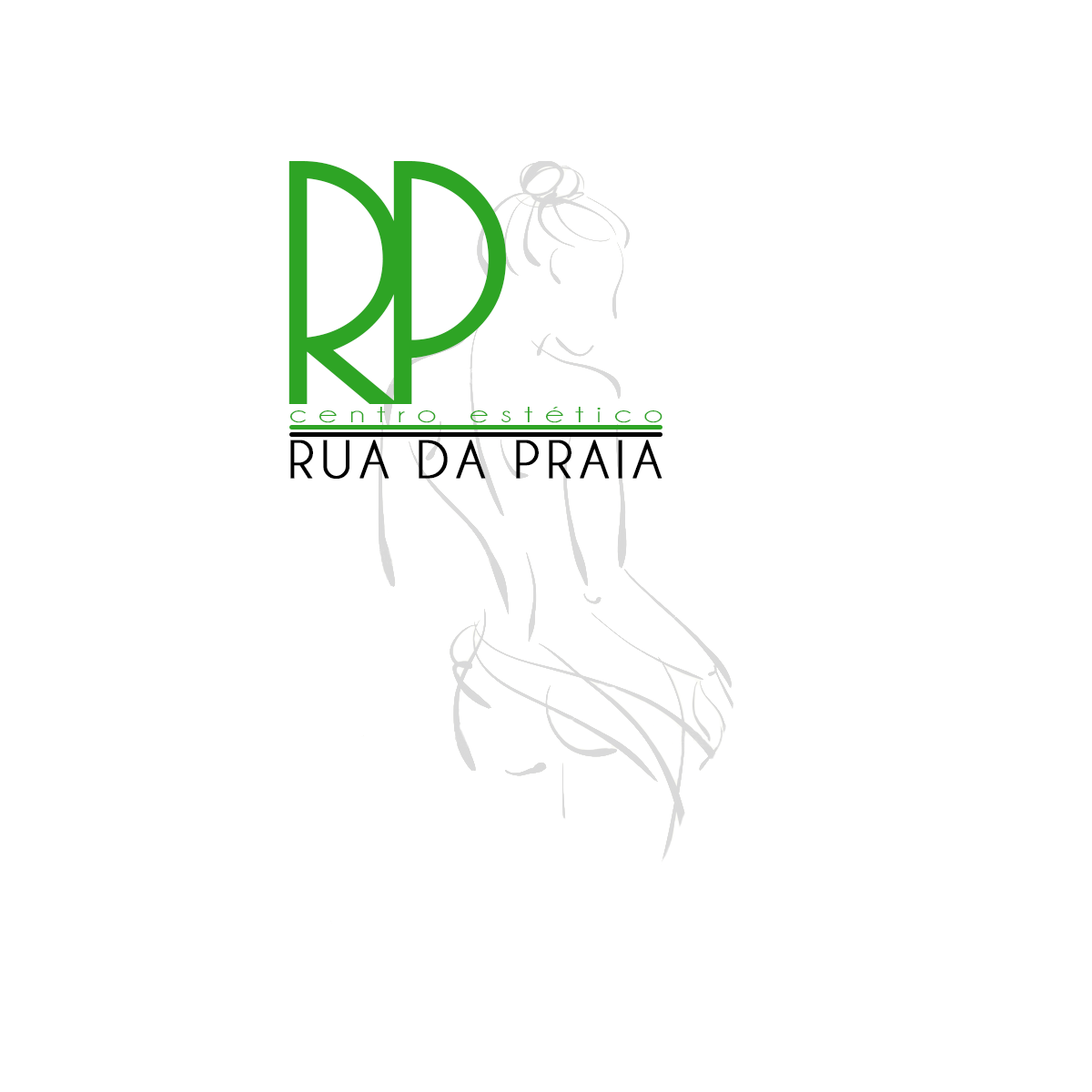
<style>
.page{position:relative;width:1092px;height:1092px;background:#ffffff}
.page>*{position:absolute;margin:0}
.t1{font:364px "ARBONNIE";letter-spacing:-0.09em;color:#2ea425}
.t2{font:25.5px "Champagne&Limousines";letter-spacing:0.33em;color:#2ea425;scale:1.43 1}
.t3{font:54.6px "Champagne&Limousines";letter-spacing:0.106em;color:#000000;font-weight:bold}
</style>
<div class="page">
<p class="t1" style="left:288px;top:161px;width:218px;height:243px">RP</p>
<p class="t2" style="left:289px;top:406px;width:373px;height:17px">centro estético</p>
<p class="t3" style="left:290px;top:440px;width:372px;height:39px">RUA DA PRAIA</p>
</div>
